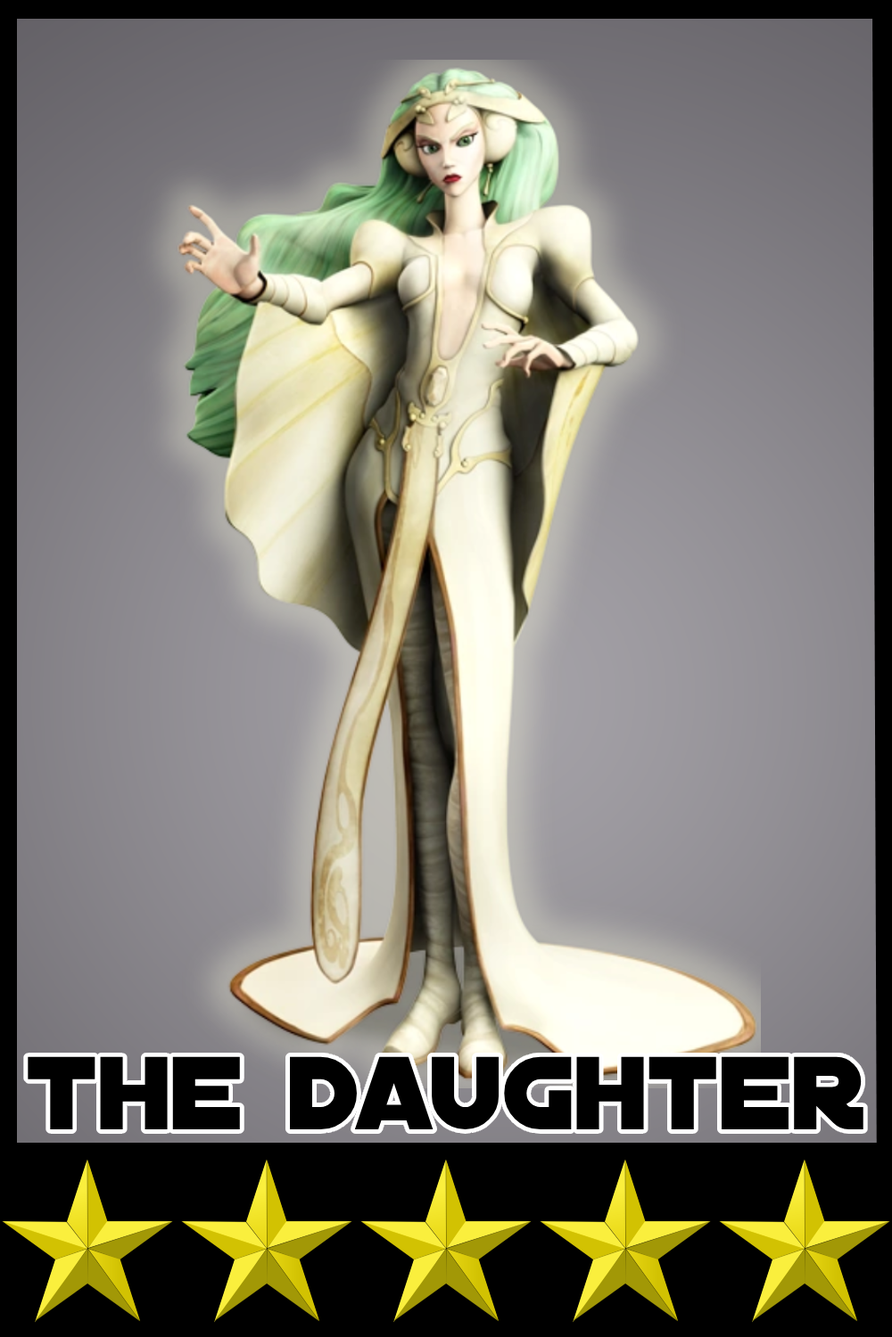
<style>
.page{position:relative;width:892px;height:1337px}
.page>*{position:absolute;margin:0}
.t1{font:111.4px "DistantGalaxy";color:#000000}
</style>
<div class="page">
<p class="t1" style="left:28px;top:1057px;width:835px;height:73px">the daughter</p>
</div>
